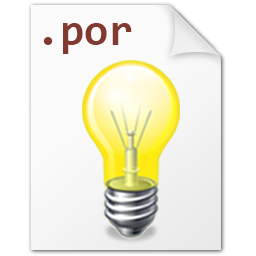
<style>
.page{position:relative;width:256px;height:256px;background:#ffffff}
.page>*{position:absolute;margin:0}
.t1{font:44px "Consolas-Bold";color:#813930}
</style>
<div class="page">
<p class="t1" style="left:43px;top:23px;width:89px;height:31px">.por</p>
</div>
